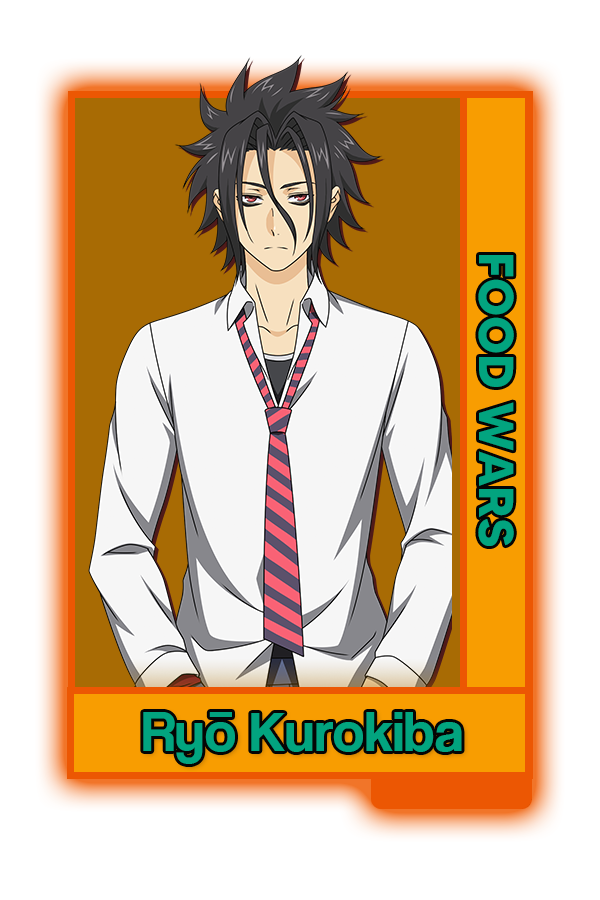
<style>
.page{position:relative;width:600px;height:900px;background:#ffffff}
.page>*{position:absolute;margin:0}
.t1{font:48.8px "MADETOMMY-Bold";color:#009f7b}
.t2{font:58.3px "CoolveticaRg-Regular";color:#009f7b}
</style>
<div class="page">
<p class="t1" style="left:478px;top:255px;width:36px;height:291px;rotate:90deg">FOOD WARS</p>
<p class="t2" style="left:143px;top:712px;width:319px;height:52px">Ryō Kurokiba</p>
</div>
